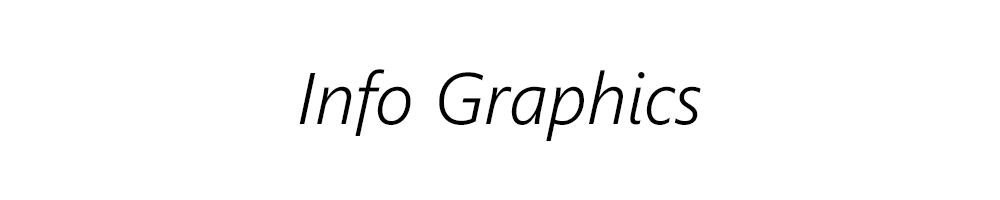
<style>
.page{position:relative;width:1000px;height:200px;background:#ffffff}
.page>*{position:absolute;margin:0}
.t1{font:72.7px "SegoeUI-SemilightItalic";color:#000000}
</style>
<div class="page">
<p class="t1" style="left:299px;top:69px;width:402px;height:72px">Info Graphics</p>
</div>
